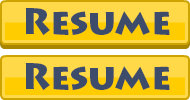
<style>
.page{position:relative;width:190px;height:100px;background:#ffd948}
.page>*{position:absolute;margin:0}
.t1{font:36px "LithosPro-Black";color:#3d4c6b}
</style>
<div class="page">
<p class="t1" style="left:25px;top:8px;width:145px;height:28px">Resume</p>
<p class="t1" style="left:25px;top:63px;width:145px;height:28px">Resume</p>
</div>
